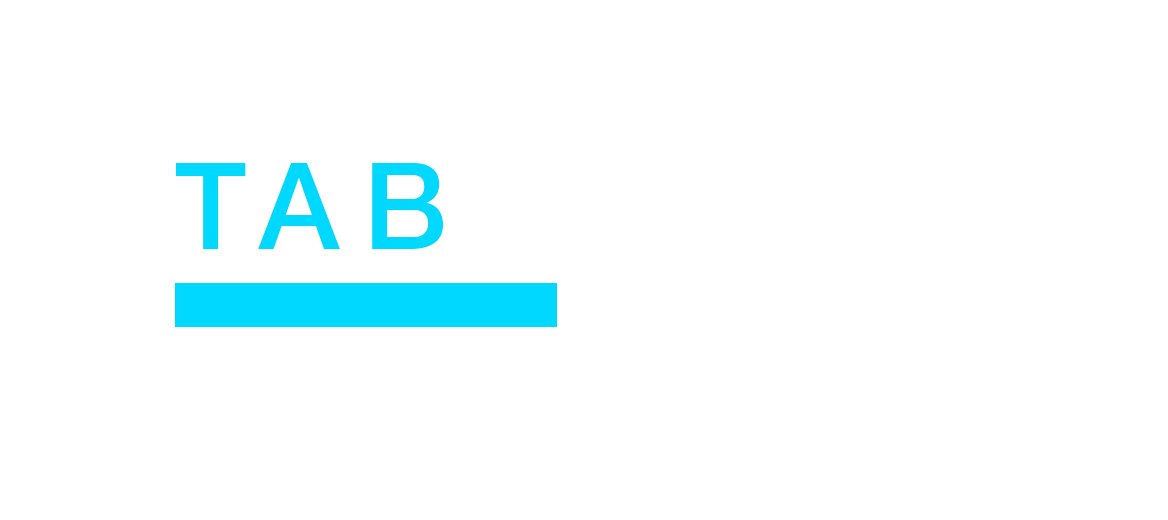
<style>
.page{position:relative;width:1168px;height:520px;background:#ffffff}
.page>*{position:absolute;margin:0}
.t1{font:120px "HelveticaNeue-Medium";letter-spacing:0.2em;color:#00d8ff}
</style>
<div class="page">
<p class="t1" style="left:175px;top:163px;width:269px;height:86px">TAB</p>
</div>
